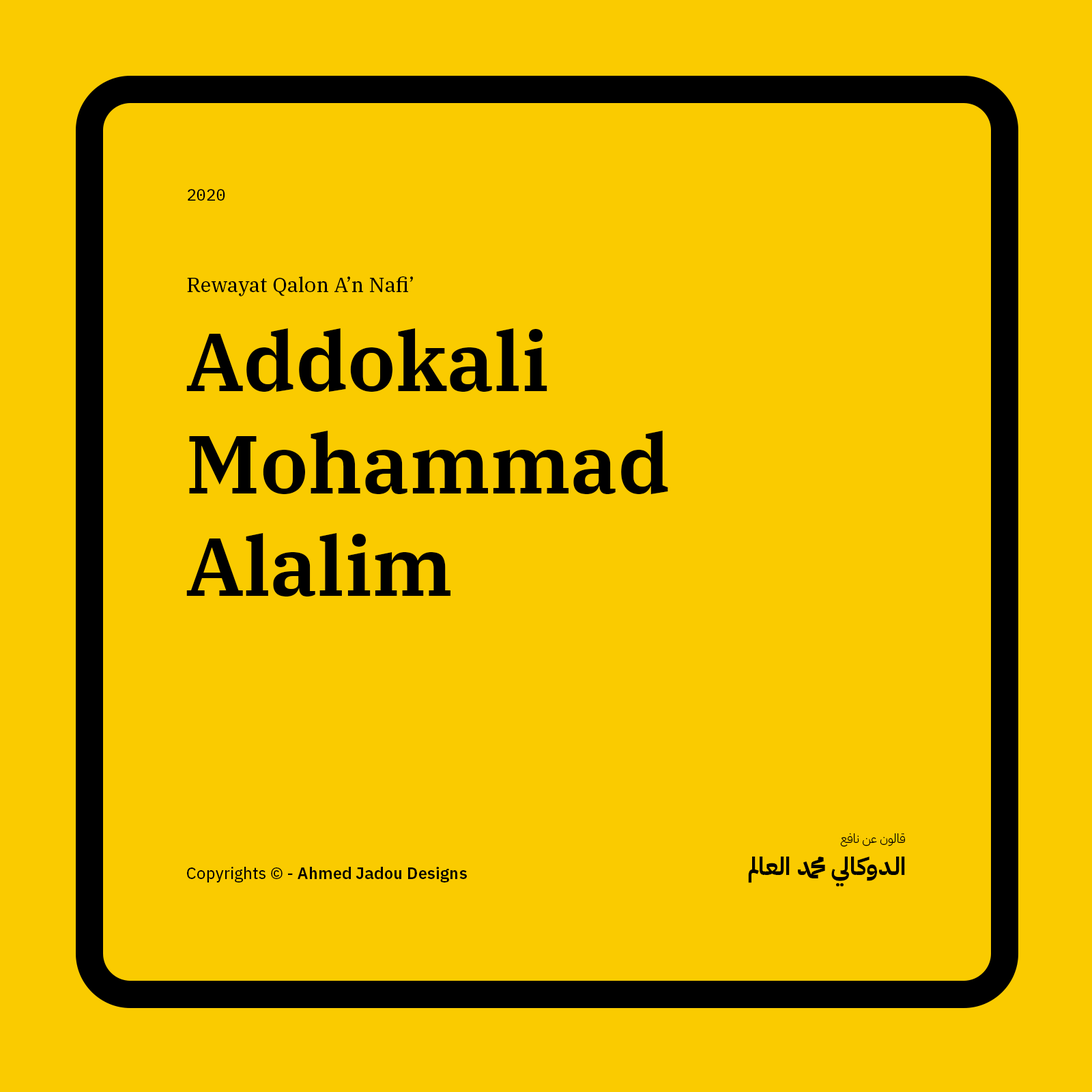
<style>
.page{position:relative;width:1092px;height:1092px;background:#facb00}
.page>*{position:absolute;margin:0}
.t1{font:16.4px "IBMPlexMono-Text";color:#000000}
.t2{font:20.5px "IBMPlexSerif-Text";color:#000000}
.t3{font:81.9px/102.7px "IBMPlexSerif-SemiBold";color:#000000}
.t4{font:12.3px "IBMPlexArabic-Light";color:#000000}
.t5{font:24.6px "IBMPlexArabic-Bold";color:#000000}
.t6{font:16.4px "IBMPlexSans-SemiBold";color:#000000}
.t7{font:16.4px "IBMPlexSans-Text";color:#000000}
</style>
<div class="page">
<p class="t1" style="left:188px;top:189px;width:37px;height:12px">2020</p>
<p class="t2" style="left:187px;top:276px;width:226px;height:20px">Rewayat Qalon A’n Nafi’</p>
<p class="t3" style="left:186px;top:328px;width:482px;height:268px">Addokali Mohammad Alalim</p>
<p class="t4" style="left:840px;top:833px;width:65px;height:14px">قالون عن نافع</p>
<p class="t5" style="left:748px;top:857px;width:157px;height:30px">الدوكالي محمد العالم</p>
<p class="t6" style="left:187px;top:867px;width:280px;height:15px"><span class="t7">Copyrights © - </span>Ahmed Jadou Designs</p>
</div>
